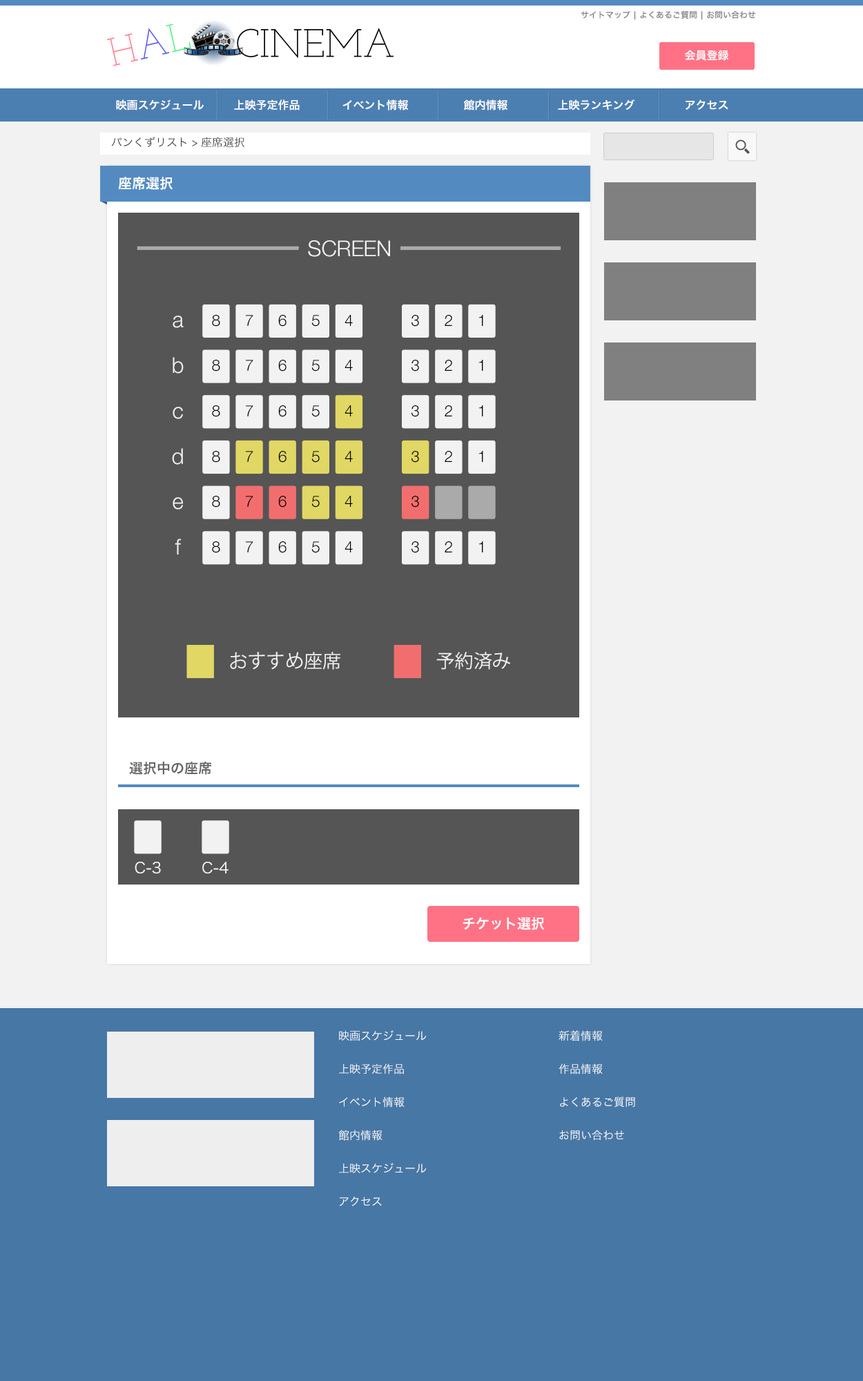
<style>
.page{position:relative;width:863px;height:1381px;background:#f2f2f2}
.page>*{position:absolute;margin:0}
.t1{font:8.3px "HiraKakuProN-W6";color:#888888}
.t2{font:11.1px "HiraKakuProN-W6";color:#ffffff}
.t3{font:11.1px "HiraKakuProN-W3";color:#333333}
.t4{font:13.8px "HiraKakuProN-W6";color:#ffffff}
.t5{font:21.8px "HelveticaNeue-Light";color:#f2f2f2}
.t6{font:15.7px "HelveticaNeue-Light";color:#000000}
.t7{font:18.8px "KozGoPr6N-Regular";color:#f2f2f2}
.t8{font:13.8px "HiraKakuProN-W6";color:#666666}
.t9{font:15.2px "HiraKakuProN-W3";color:#fefefe}
.t10{font:11.1px/16.6px "HiraKakuProN-W3";color:#ffffff}
</style>
<div class="page">
<p class="t1" style="left:581px;top:10px;width:175px;height:10px">サイトマップ | よくあるご質問 | お問い合わせ</p>
<p class="t2" style="left:685px;top:50px;width:44px;height:11px">会員登録</p>
<p class="t2" style="left:116px;top:99px;width:88px;height:12px">映画スケジュール</p>
<p class="t2" style="left:234px;top:99px;width:66px;height:12px">上映予定作品</p>
<p class="t2" style="left:343px;top:99px;width:66px;height:12px">イベント情報</p>
<p class="t2" style="left:463px;top:99px;width:45px;height:12px">館内情報</p>
<p class="t2" style="left:558px;top:99px;width:77px;height:12px">上映ランキング</p>
<p class="t2" style="left:686px;top:99px;width:43px;height:11px">アクセス</p>
<p class="t3" style="left:111px;top:137px;width:134px;height:11px">パンくずリスト &gt; 座席選択</p>
<p class="t4" style="left:118px;top:177px;width:55px;height:13px">座席選択</p>
<p class="t5" style="left:308px;top:240px;width:82px;height:17px">SCREEN</p>
<p class="t5" style="left:173px;top:316px;width:11px;height:12px">a</p>
<p class="t6" style="left:212px;top:315px;width:8px;height:12px">8</p>
<p class="t6" style="left:246px;top:315px;width:7px;height:11px">7</p>
<p class="t6" style="left:278px;top:315px;width:9px;height:12px">6</p>
<p class="t6" style="left:311px;top:315px;width:9px;height:12px">5</p>
<p class="t6" style="left:345px;top:315px;width:8px;height:11px">4</p>
<p class="t6" style="left:412px;top:315px;width:7px;height:12px">3</p>
<p class="t6" style="left:445px;top:315px;width:7px;height:11px">2</p>
<p class="t6" style="left:479px;top:315px;width:4px;height:11px">1</p>
<p class="t5" style="left:173px;top:357px;width:11px;height:17px">b</p>
<p class="t6" style="left:212px;top:360px;width:8px;height:12px">8</p>
<p class="t6" style="left:246px;top:360px;width:7px;height:11px">7</p>
<p class="t6" style="left:278px;top:360px;width:9px;height:12px">6</p>
<p class="t6" style="left:311px;top:360px;width:9px;height:12px">5</p>
<p class="t6" style="left:345px;top:360px;width:8px;height:11px">4</p>
<p class="t6" style="left:412px;top:360px;width:7px;height:12px">3</p>
<p class="t6" style="left:445px;top:360px;width:7px;height:11px">2</p>
<p class="t6" style="left:479px;top:360px;width:4px;height:11px">1</p>
<p class="t5" style="left:173px;top:407px;width:10px;height:12px">c</p>
<p class="t6" style="left:212px;top:405px;width:8px;height:12px">8</p>
<p class="t6" style="left:246px;top:405px;width:7px;height:11px">7</p>
<p class="t6" style="left:278px;top:405px;width:9px;height:12px">6</p>
<p class="t6" style="left:311px;top:405px;width:9px;height:12px">5</p>
<p class="t6" style="left:345px;top:405px;width:8px;height:11px">4</p>
<p class="t6" style="left:412px;top:405px;width:7px;height:12px">3</p>
<p class="t6" style="left:445px;top:405px;width:7px;height:11px">2</p>
<p class="t6" style="left:479px;top:405px;width:4px;height:11px">1</p>
<p class="t5" style="left:172px;top:448px;width:11px;height:17px">d</p>
<p class="t6" style="left:212px;top:451px;width:8px;height:12px">8</p>
<p class="t6" style="left:246px;top:451px;width:7px;height:11px">7</p>
<p class="t6" style="left:278px;top:451px;width:9px;height:12px">6</p>
<p class="t6" style="left:311px;top:451px;width:9px;height:12px">5</p>
<p class="t6" style="left:345px;top:451px;width:8px;height:11px">4</p>
<p class="t6" style="left:412px;top:451px;width:7px;height:12px">3</p>
<p class="t6" style="left:445px;top:451px;width:7px;height:11px">2</p>
<p class="t6" style="left:479px;top:451px;width:4px;height:11px">1</p>
<p class="t5" style="left:173px;top:497px;width:10px;height:13px">e</p>
<p class="t6" style="left:212px;top:496px;width:8px;height:12px">8</p>
<p class="t6" style="left:246px;top:496px;width:7px;height:11px">7</p>
<p class="t6" style="left:278px;top:496px;width:9px;height:12px">6</p>
<p class="t6" style="left:311px;top:496px;width:9px;height:12px">5</p>
<p class="t6" style="left:345px;top:496px;width:8px;height:11px">4</p>
<p class="t6" style="left:412px;top:496px;width:7px;height:12px">3</p>
<p class="t5" style="left:175px;top:539px;width:6px;height:16px">f</p>
<p class="t6" style="left:212px;top:541px;width:8px;height:12px">8</p>
<p class="t6" style="left:246px;top:541px;width:7px;height:12px">7</p>
<p class="t6" style="left:278px;top:541px;width:9px;height:12px">6</p>
<p class="t6" style="left:311px;top:541px;width:9px;height:12px">5</p>
<p class="t6" style="left:345px;top:541px;width:8px;height:12px">4</p>
<p class="t6" style="left:412px;top:541px;width:7px;height:12px">3</p>
<p class="t6" style="left:445px;top:541px;width:7px;height:12px">2</p>
<p class="t6" style="left:479px;top:541px;width:4px;height:12px">1</p>
<p class="t7" style="left:230px;top:652px;width:110px;height:18px">おすすめ座席</p>
<p class="t7" style="left:436px;top:652px;width:74px;height:18px">予約済み</p>
<p class="t8" style="left:129px;top:762px;width:82px;height:13px">選択中の座席</p>
<p class="t9" style="left:135px;top:862px;width:26px;height:12px">C-3</p>
<p class="t9" style="left:202px;top:862px;width:27px;height:12px">C-4</p>
<p class="t4" style="left:463px;top:917px;width:81px;height:13px">チケット選択</p>
<p class="t10" style="left:338px;top:1030px;width:89px;height:177px">映画スケジュール<br><br>上映予定作品<br><br>イベント情報<br><br>館内情報<br><br>上映スケジュール<br><br>アクセス</p>
<p class="t10" style="left:559px;top:1030px;width:76px;height:110px">新着情報<br><br>作品情報<br><br>よくあるご質問<br><br>お問い合わせ</p>
</div>
